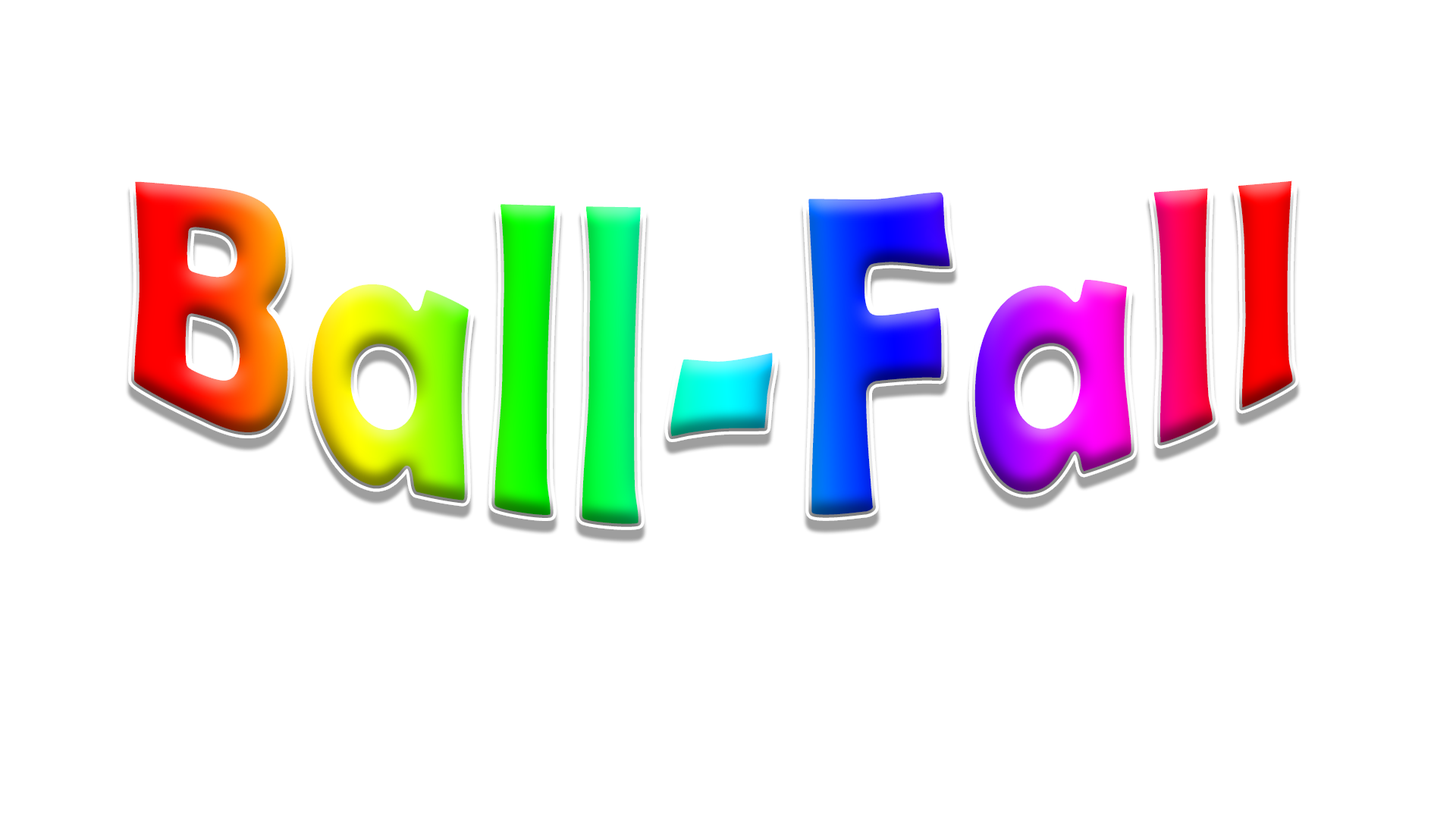
<style>
.page{position:relative;width:1456px;height:819px;background:#ffffff}
.page>*{position:absolute;margin:0}
.t1{font:291.1px "BerlinSansFBDemi-Bold";letter-spacing:0.025em}
</style>
<div class="page">
<p class="t1" style="left:131px;top:177px;width:1165px;height:350px">Ball-Fall</p>
</div>
